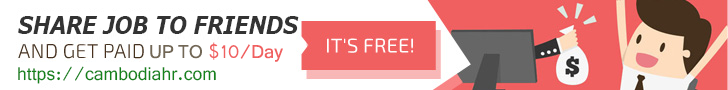
<style>
.page{position:relative;width:728px;height:90px;background:#ffffff}
.page>*{position:absolute;margin:0}
.t1{font:24px "Verdana-BoldItalic";color:#333333;scale:0.86 1}
.t2{font:20px "Vrinda";color:#f06060}
.t3{font:20px "Vrinda";color:#726755}
.t4{font:20px "Vrinda";color:#14831b}
</style>
<div class="page">
<p class="t1" style="left:18px;top:16px;width:281px;height:18px">SHARE JOB TO FRIENDS</p>
<p class="t2" style="left:150px;top:42px;width:133px;height:20px"><span class="t3">UP TO </span>$10/Day</p>
<p class="t4" style="left:18px;top:66px;width:198px;height:18px">https://cambodiahr.com</p>
</div>
